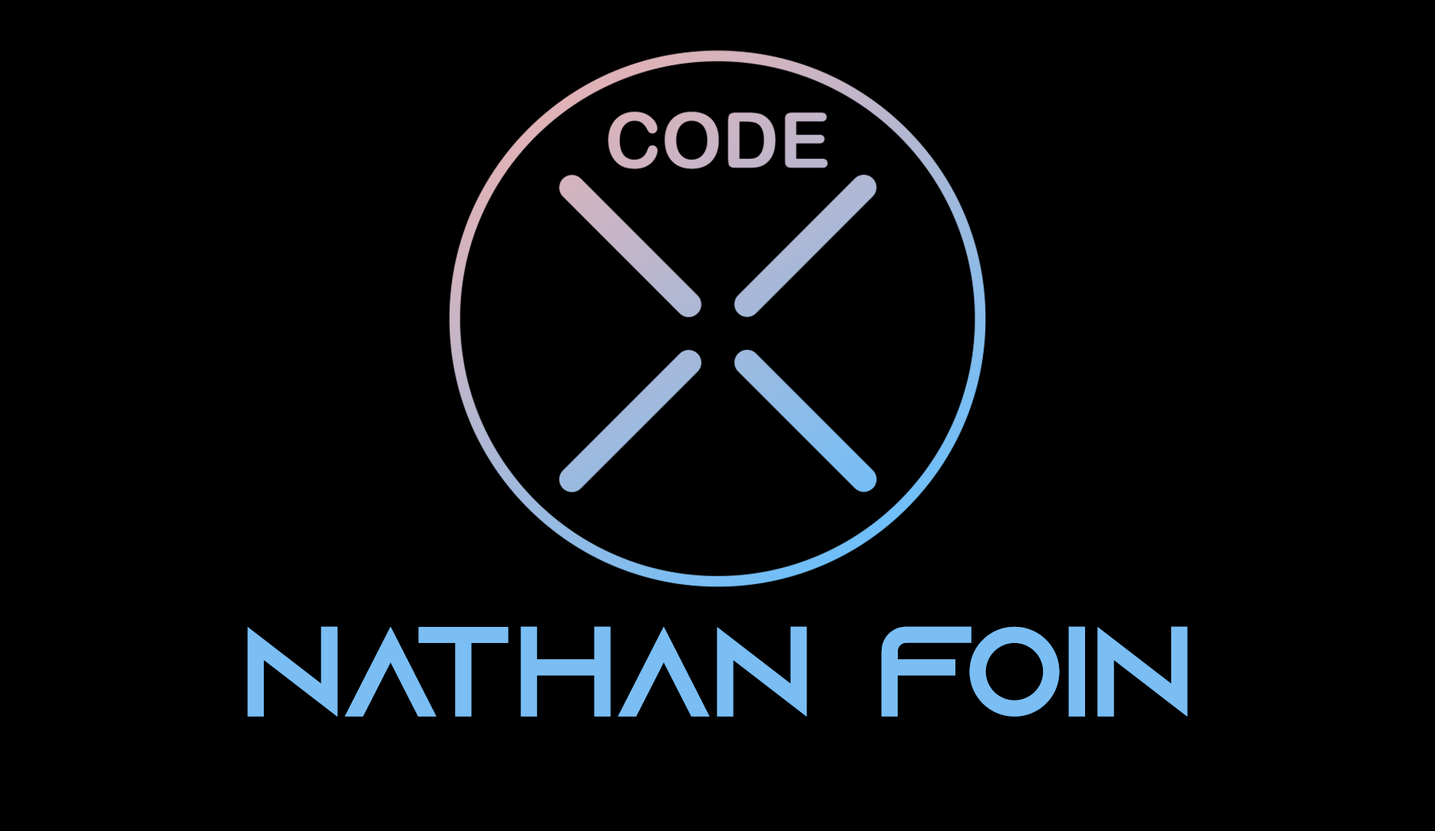
<style>
.page{position:relative;width:1435px;height:831px;background:#000000}
.page>*{position:absolute;margin:0}
.t1{font:127.9px "AzonixRegular";color:#7abef4}
</style>
<div class="page">
<p class="t1" style="left:247px;top:626px;width:941px;height:91px">Nathan Foin</p>
</div>
